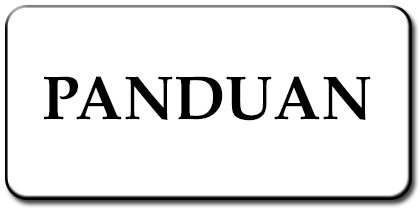
<style>
.page{position:relative;width:420px;height:210px;background:#ffffff}
.page>*{position:absolute;margin:0}
.t1{font:61.4px "PalatinoLinotype-Bold";color:#000000}
</style>
<div class="page">
<p class="t1" style="left:44px;top:76px;width:327px;height:45px">PANDUAN</p>
</div>
